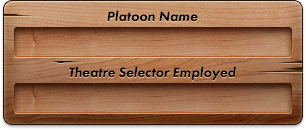
<style>
.page{position:relative;width:306px;height:130px}
.page>*{position:absolute;margin:0}
.t1{font:14px "FuturaPT-HeavyObl";color:#000000}
</style>
<div class="page">
<p class="t1" style="left:107px;top:10px;width:91px;height:12px">Platoon Name</p>
<p class="t1" style="left:69px;top:66px;width:167px;height:15px">Theatre Selector Employed</p>
</div>
